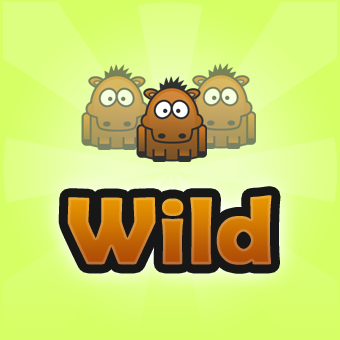
<style>
.page{position:relative;width:340px;height:340px}
.page>*{position:absolute;margin:0}
.t1{font:96px "BerlinSansFBDemi-Bold";font-weight:bold}
</style>
<div class="page">
<p class="t1" style="left:0px;top:174px;width:340px;height:92px">Wild</p>
</div>
